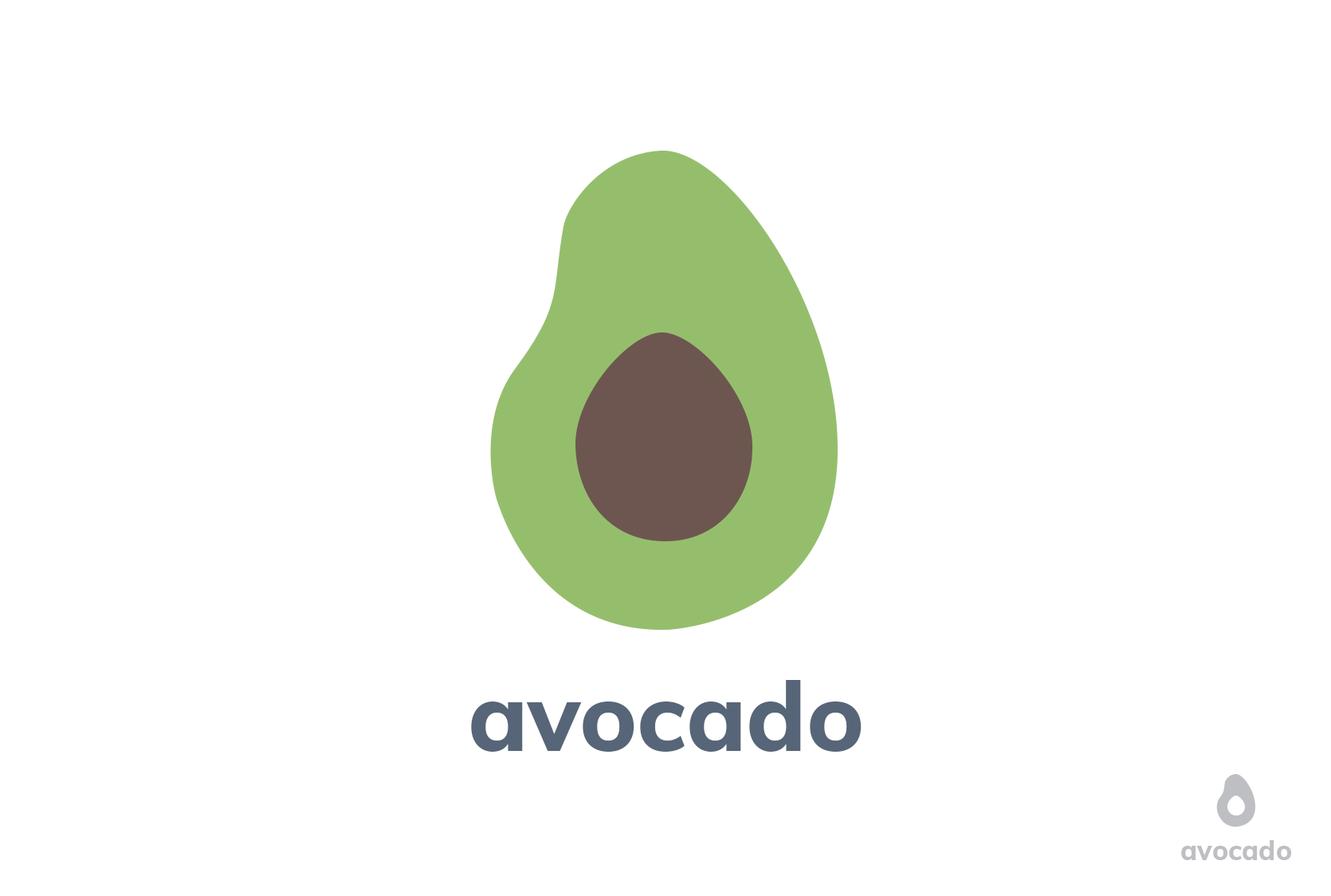
<style>
.page{position:relative;width:1331px;height:896px;background:#ffffff}
.page>*{position:absolute;margin:0}
.t1{font:95.6px "Muli-ExtraBold";color:#576578}
.t2{font:26.7px "Muli-ExtraBold";color:#bebfc2}
</style>
<div class="page">
<p class="t1" style="left:471px;top:680px;width:391px;height:72px">avocado</p>
<p class="t2" style="left:1181px;top:840px;width:111px;height:20px">avocado</p>
</div>
